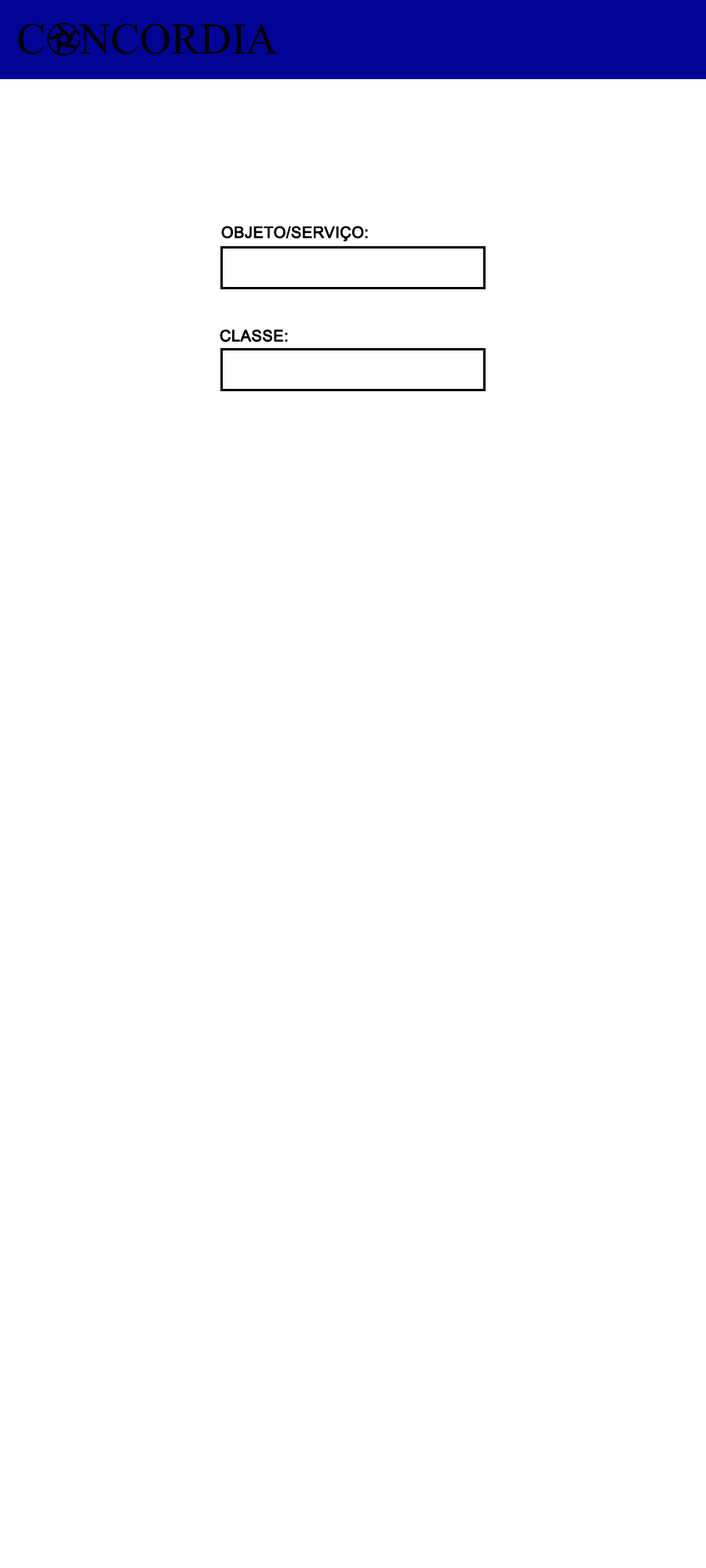
<style>
.page{position:relative;width:706px;height:1568px;background:#ffffff}
.page>*{position:absolute;margin:0}
.t1{font:43.8px "TimesNewRomanPSMT";color:#020202}
.t2{font:15.7px "ArialMT";color:#000000;font-weight:bold}
</style>
<div class="page">
<p class="t1" style="left:18px;top:24px;width:27px;height:31px">C</p>
<p class="t1" style="left:78px;top:24px;width:199px;height:31px">NCORDIA</p>
<p class="t2" style="left:221px;top:226px;width:147px;height:15px">OBJETO/SERVIÇO:</p>
<p class="t2" style="left:220px;top:329px;width:68px;height:13px">CLASSE:</p>
</div>
